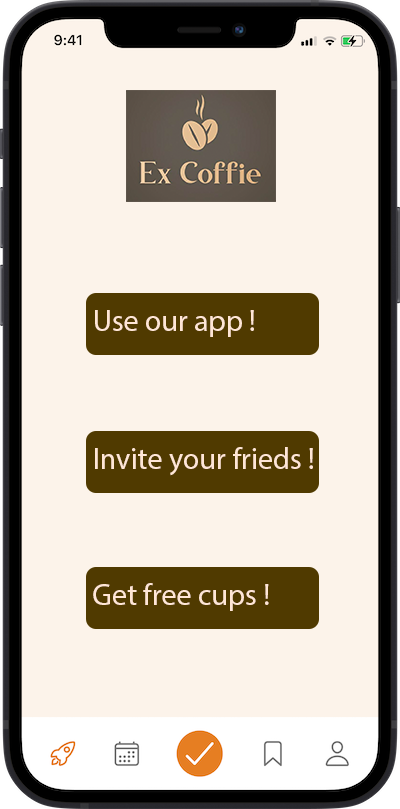
<style>
.page{position:relative;width:400px;height:809px;background:#fcf3ea}
.page>*{position:absolute;margin:0}
.t1{font:30px "MyriadPro-Regular";color:#ffe6d6}
</style>
<div class="page">
<p class="t1" style="left:95px;top:310px;width:159px;height:27px">Use our app !</p>
<p class="t1" style="left:95px;top:447px;width:218px;height:29px">Invite your frieds !</p>
<p class="t1" style="left:93px;top:583px;width:176px;height:28px">Get free cups !</p>
</div>
